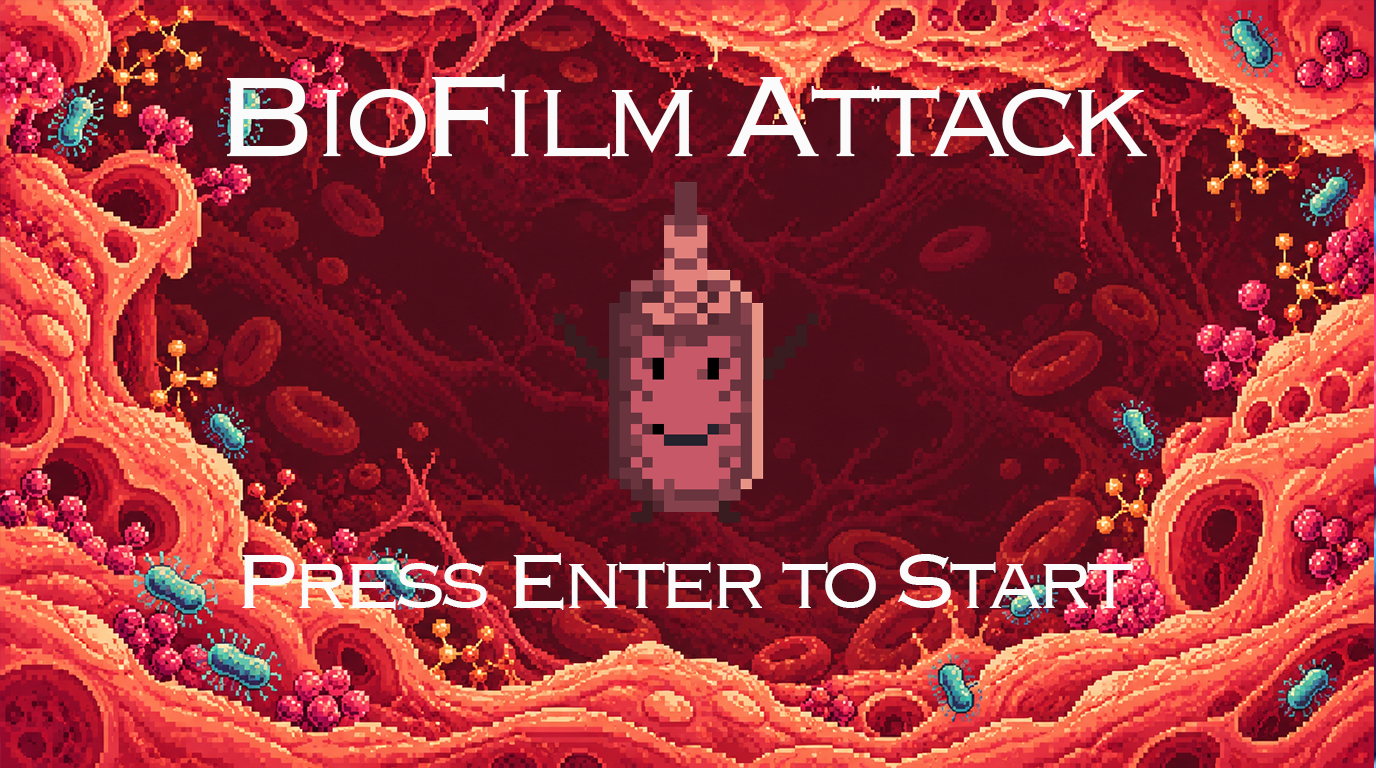
<style>
.page{position:relative;width:1376px;height:768px}
.page>*{position:absolute;margin:0}
.t1{font:150px "Copperplate-Light";letter-spacing:-0.1em;color:#fbfbfb}
.t2{font:100px "Copperplate-Light";letter-spacing:-0.1em;color:#fbfbfb}
</style>
<div class="page">
<p class="t1" style="left:227px;top:74px;width:920px;height:85px">BioFilm Attack</p>
<p class="t2" style="left:242px;top:553px;width:891px;height:57px">Press Enter to Start</p>
</div>
